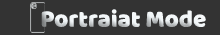
<style>
.page{position:relative;width:220px;height:35px;background:#333333}
.page>*{position:absolute;margin:0}
.t1{font:24.3px "Baloo-Regular";color:#f1f6f8}
</style>
<div class="page">
<p class="t1" style="left:41px;top:9px;width:165px;height:18px">Portraiat Mode</p>
</div>
